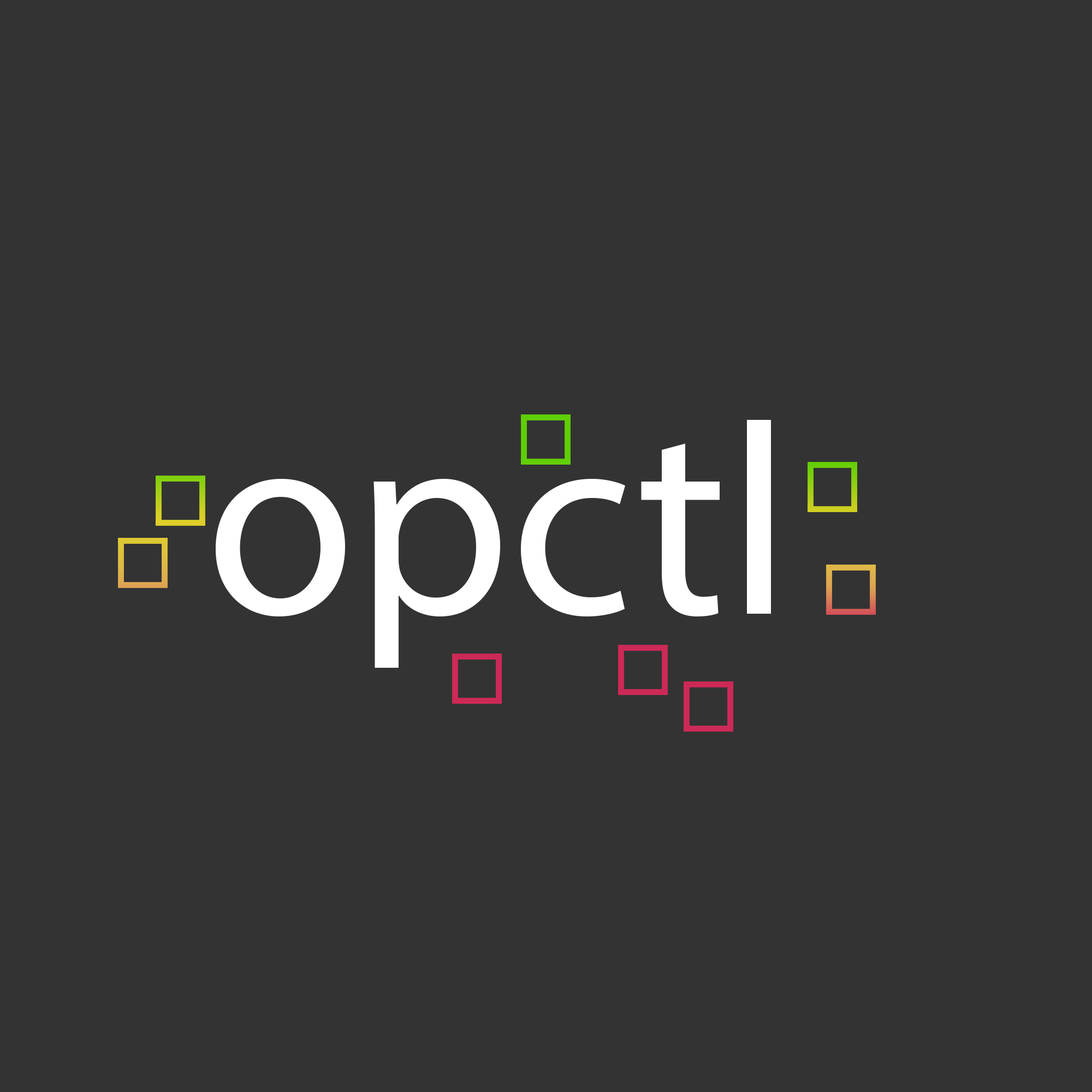
<style>
.page{position:relative;width:1092px;height:1092px;background:#333333}
.page>*{position:absolute;margin:0}
.t1{font:273px "MyriadPro-Regular";color:#ffffff}
</style>
<div class="page">
<p class="t1" style="left:216px;top:420px;width:555px;height:248px">opctl</p>
</div>
